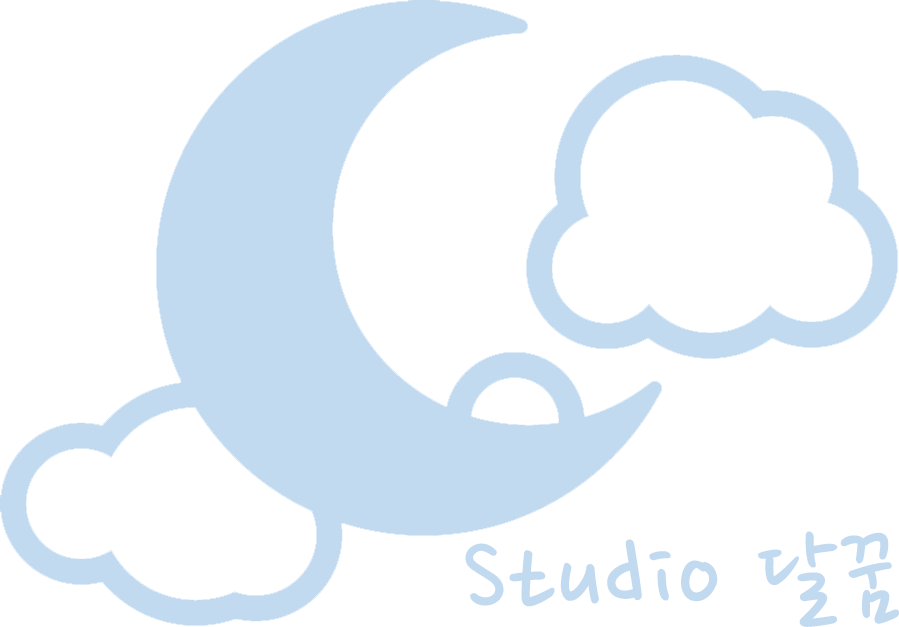
<style>
.page{position:relative;width:899px;height:627px;background:#ffffff}
.page>*{position:absolute;margin:0}
.t1{font:110px "NanumPenOTF";color:#c2daf0;font-weight:bold}
</style>
<div class="page">
<p class="t1" style="left:465px;top:531px;width:434px;height:96px">Studio 달꿈</p>
</div>
